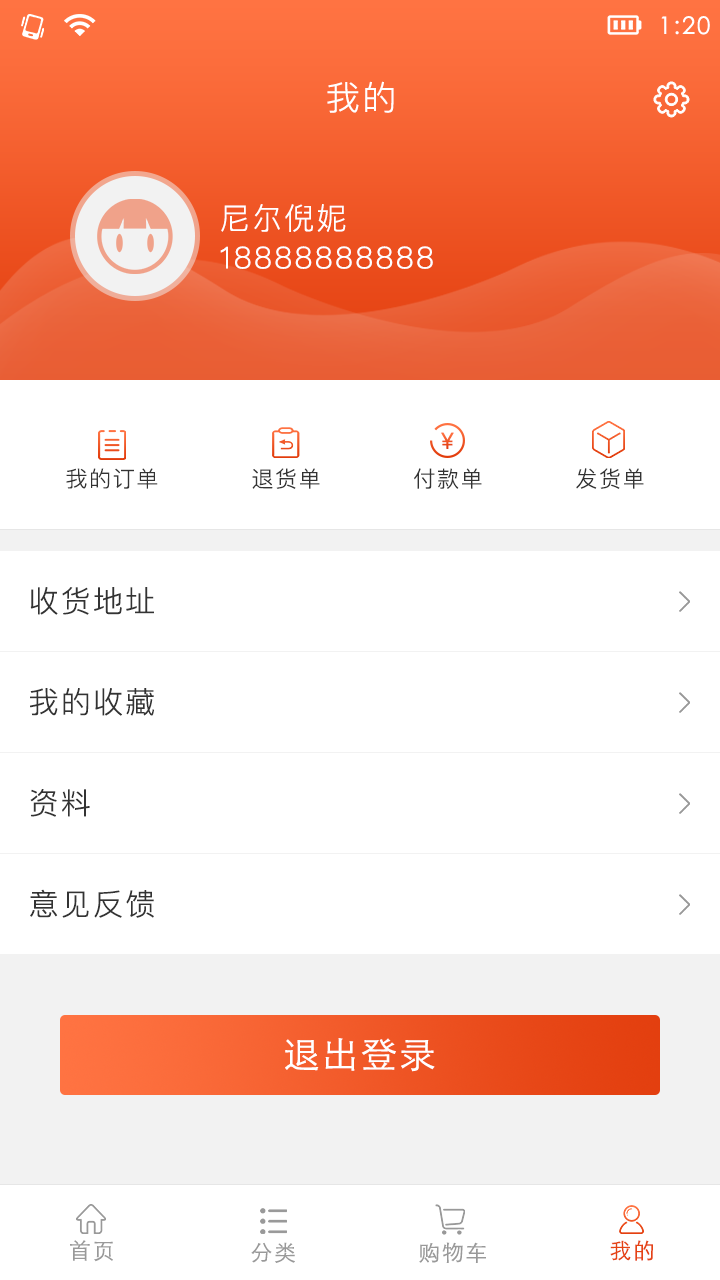
<style>
.page{position:relative;width:720px;height:1280px;background:#ffffff}
.page>*{position:absolute;margin:0}
.t1{font:24px "STXihei";letter-spacing:0.075em;color:#ffffff}
.t2{font:34px "PingFangSC-Light";letter-spacing:0.075em;color:#ffffff}
.t3{font:30px "PingFangSC-Light";letter-spacing:0.075em;color:#ffffff}
.t4{font:22px "PingFangSC-Light";letter-spacing:0.075em;color:#ef5525;font-weight:bold}
.t5{font:22px "PingFangSC-Light";letter-spacing:0.075em;color:#333333}
.t6{font:30px "PingFangSC-Light";letter-spacing:0.075em;color:#333333}
.t7{font:36px "STHeitiSC-Light";letter-spacing:0.075em;color:#ffffff}
.t8{font:22px "STHeitiSC-Light";letter-spacing:0.075em;color:#999999}
.t9{font:22px "STHeitiSC-Light";letter-spacing:0.075em;color:#e54313}
</style>
<div class="page">
<p class="t1" style="left:661px;top:16px;width:49px;height:19px">1:20</p>
<p class="t2" style="left:327px;top:81px;width:67px;height:32px">我的</p>
<p class="t3" style="left:221px;top:204px;width:125px;height:28px">尼尔倪妮</p>
<p class="t3" style="left:220px;top:246px;width:213px;height:23px">18888888888</p>
<p class="t4" style="left:441px;top:432px;width:13px;height:17px">¥</p>
<p class="t5" style="left:66px;top:468px;width:92px;height:21px">我的订单</p>
<p class="t5" style="left:252px;top:468px;width:68px;height:21px">退货单</p>
<p class="t5" style="left:414px;top:468px;width:68px;height:21px">付款单</p>
<p class="t5" style="left:576px;top:468px;width:68px;height:21px">发货单</p>
<p class="t6" style="left:30px;top:587px;width:124px;height:28px">收货地址</p>
<p class="t6" style="left:30px;top:688px;width:124px;height:28px">我的收藏</p>
<p class="t6" style="left:30px;top:789px;width:60px;height:28px">资料</p>
<p class="t6" style="left:30px;top:889px;width:124px;height:29px">意见反馈</p>
<p class="t7" style="left:285px;top:1038px;width:150px;height:34px">退出登录</p>
<p class="t8" style="left:70px;top:1240px;width:43px;height:22px">首页</p>
<p class="t9" style="left:610px;top:1240px;width:43px;height:21px">我的</p>
<p class="t8" style="left:251px;top:1242px;width:44px;height:21px">分类</p>
<p class="t8" style="left:419px;top:1242px;width:67px;height:21px">购物车</p>
</div>
